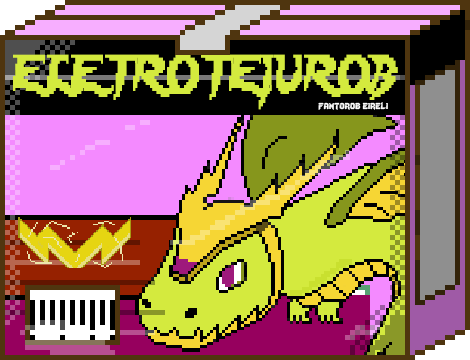
<style>
.page{position:relative;width:470px;height:360px}
.page>*{position:absolute;margin:0}
.t1{font:48.3px "Lady-Radical";color:#d4ea3e;scale:0.71 1}
.t2{font:12px "Lady-Radical";color:#fbfbfb}
</style>
<div class="page">
<p class="t1" style="left:13px;top:54px;width:385px;height:56px">ELETROTEIUROB</p>
<p class="t2" style="left:318px;top:102px;width:70px;height:8px">fantorob eireli</p>
</div>
